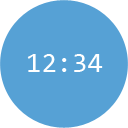
<style>
.page{position:relative;width:128px;height:128px;background:#56a1d5}
.page>*{position:absolute;margin:0}
.t1{font:28px "Consolas";color:#ffffff}
</style>
<div class="page">
<p class="t1" style="left:27px;top:54px;width:76px;height:18px">12:34</p>
</div>
